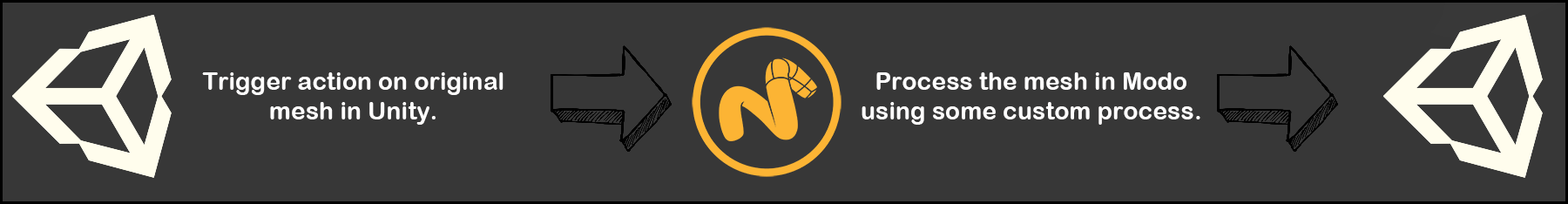
<style>
.page{position:relative;width:1568px;height:204px;background:#373737}
.page>*{position:absolute;margin:0}
.t1{font:24.6px "ArialRoundedMTBold";color:#fffefe}
</style>
<div class="page">
<p class="t1" style="left:202px;top:72px;width:302px;height:53px;text-align:center">Trigger action on original<br>mesh in Unity.</p>
<p class="t1" style="left:862px;top:72px;width:338px;height:53px;text-align:center">Process the mesh in Modo<br>using some custom process.</p>
</div>
